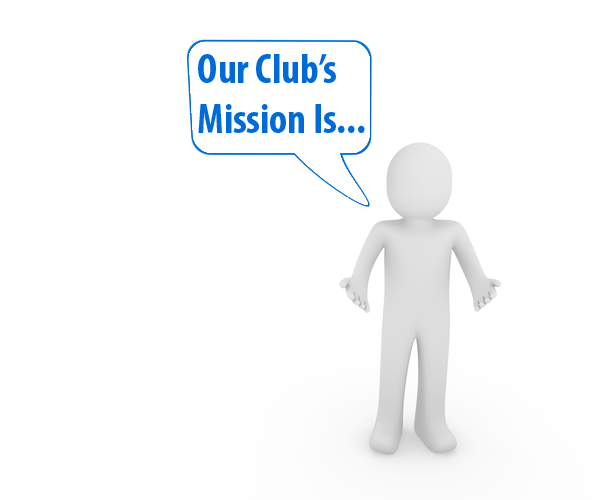
<style>
.page{position:relative;width:600px;height:500px;background:#ffffff}
.page>*{position:absolute;margin:0}
.t1{font:41.7px "MyriadPro-BoldCond";color:#006ad8}
</style>
<div class="page">
<p class="t1" style="left:198px;top:54px;width:167px;height:79px">Our Club’s<br>Mission Is...</p>
</div>
